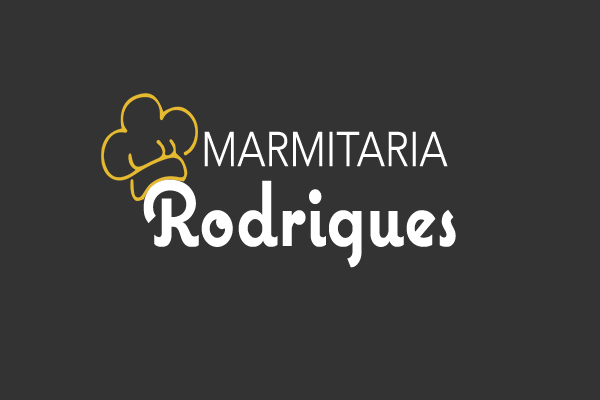
<style>
.page{position:relative;width:600px;height:400px;background:#333333}
.page>*{position:absolute;margin:0}
.t1{font:48.3px "AvenirArabic-Light";color:#ffffff;scale:0.84 1}
.t2{font:91.7px "CoquetteBold";color:#ffffff;scale:0.84 1}
</style>
<div class="page">
<p class="t1" style="left:204px;top:131px;width:244px;height:36px">MARMITARIA</p>
<p class="t2" style="left:143px;top:179px;width:313px;height:89px">Rodrigues</p>
</div>
